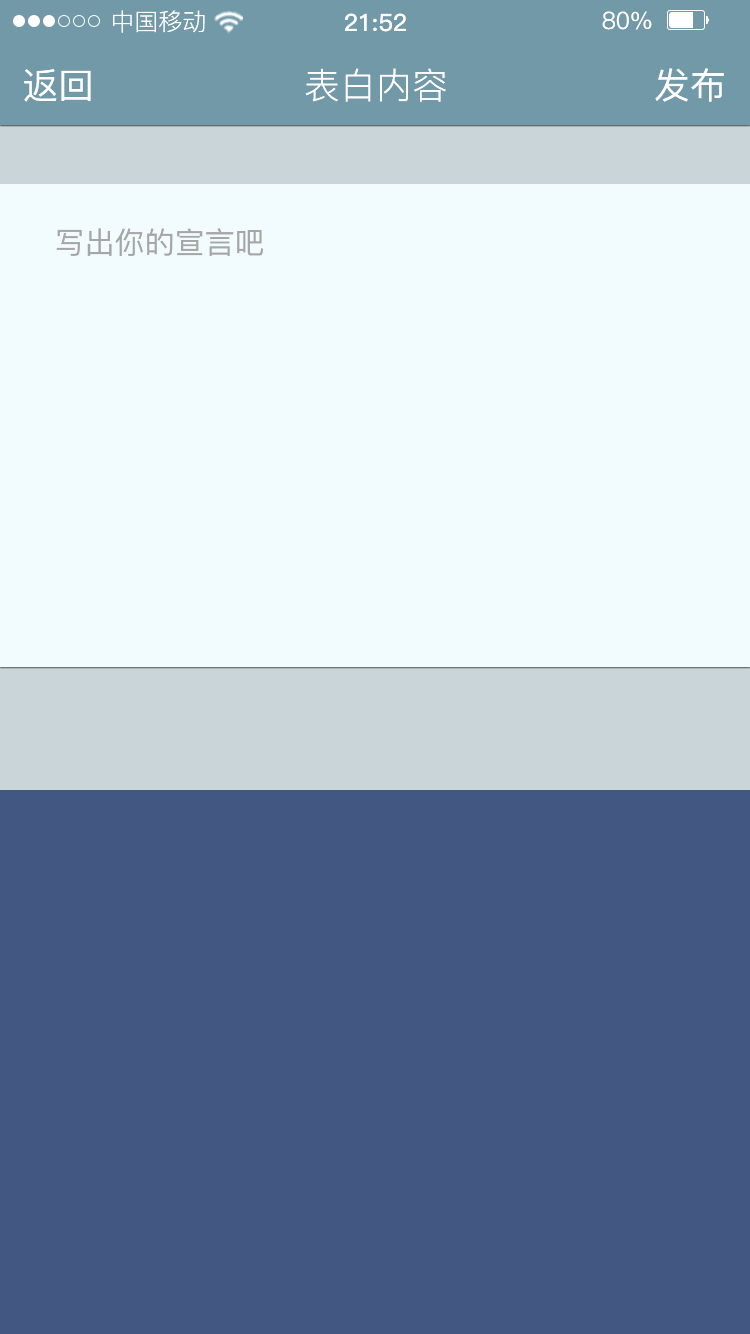
<style>
.page{position:relative;width:750px;height:1334px;background:#425781}
.page>*{position:absolute;margin:0}
.t1{font:24px "PingFang-SC-Regular";color:#ffffff}
.t2{font:24px "PingFang-SC-Bold";color:#ffffff}
.t3{font:24px "PingFang-SC-Medium";color:#ffffff}
.t4{font:36px "PingFang-SC-Medium";color:#ffffff}
.t5{font:36px "PingFang-SC-Regular";color:#ffffff}
.t6{font:30px "PingFang-SC-Medium";color:#a6a6a6}
</style>
<div class="page">
<p class="t1" style="left:113px;top:10px;width:92px;height:23px">中国移动</p>
<p class="t2" style="left:345px;top:13px;width:61px;height:19px">21:52</p>
<p class="t3" style="left:602px;top:11px;width:50px;height:19px">80%</p>
<p class="t4" style="left:24px;top:69px;width:67px;height:33px">返回</p>
<p class="t5" style="left:305px;top:68px;width:141px;height:34px">表白内容</p>
<p class="t4" style="left:655px;top:68px;width:69px;height:34px">发布</p>
<p class="t6" style="left:56px;top:228px;width:207px;height:28px">写出你的宣言吧</p>
</div>
